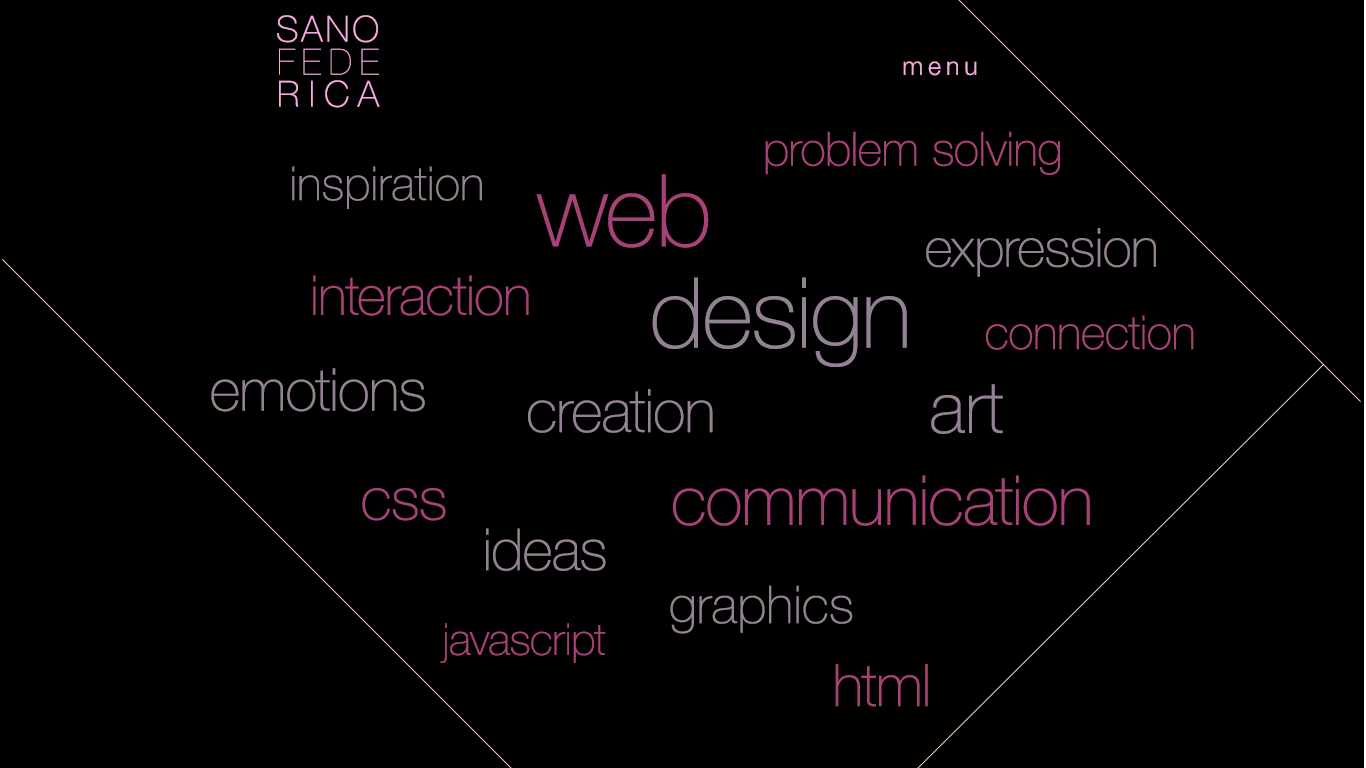
<style>
.page{position:relative;width:1366px;height:768px;background:#000000}
.page>*{position:absolute;margin:0}
.t1{font:36px/34px "HelveticaNeue-Thin";letter-spacing:0.075em;color:#f3a9dd}
.t2{font:36px/33px "HelveticaNeue-UltraLight";letter-spacing:0.22em;color:#f3a9dd}
.t3{font:36px/32px "HelveticaNeue-Thin";letter-spacing:0.26em;color:#f3a9dd}
.t4{font:25px "HelveticaNeue-Light";letter-spacing:0.2em;color:#f3a9dd}
.t5{font:47px "HelveticaNeueLTStd-Th";color:#a64277}
.t6{font:47px "HelveticaNeueLTStd-Th";color:#938294}
.t7{font:101px "HelveticaNeueLTStd-Th";color:#a64277}
.t8{font:54px "HelveticaNeueLTStd-Th";color:#938294}
.t9{font:55px "HelveticaNeueLTStd-Th";color:#a64277}
.t10{font:98px "HelveticaNeueLTStd-Th";color:#938294}
.t11{font:59px "HelveticaNeueLTStd-Th";color:#938294}
.t12{font:60px "HelveticaNeueLTStd-Th";color:#938294}
.t13{font:72px "HelveticaNeueLTStd-Th";color:#938294}
.t14{font:69px "HelveticaNeueLTStd-Th";color:#a64277}
.t15{font:60px "HelveticaNeueLTStd-Th";color:#a64277}
.t16{font:58px "HelveticaNeueLTStd-Th";color:#938294}
.t17{font:52px "HelveticaNeueLTStd-Th";color:#938294}
.t18{font:44px "HelveticaNeueLTStd-Th";color:#a64277}
.t19{font:59px "HelveticaNeueLTStd-Th";color:#a64277}
</style>
<div class="page">
<p class="t1" style="left:277px;top:15px;width:103px;height:93px;text-align:right">SANO<br><span class="t2">FEDE<br></span><span class="t3">RICA</span></p>
<p class="t4" style="left:903px;top:61px;width:74px;height:15px">menu</p>
<p class="t5" style="left:765px;top:131px;width:295px;height:44px">problem solving</p>
<p class="t6" style="left:292px;top:166px;width:190px;height:43px">inspiration</p>
<p class="t7" style="left:536px;top:174px;width:173px;height:74px">web</p>
<p class="t8" style="left:926px;top:228px;width:230px;height:49px">expression</p>
<p class="t9" style="left:313px;top:275px;width:216px;height:41px">interaction</p>
<p class="t10" style="left:652px;top:277px;width:255px;height:90px">design</p>
<p class="t5" style="left:986px;top:315px;width:208px;height:35px">connection</p>
<p class="t11" style="left:211px;top:368px;width:214px;height:44px">emotions</p>
<p class="t12" style="left:528px;top:389px;width:185px;height:44px">creation</p>
<p class="t13" style="left:931px;top:384px;width:72px;height:50px">art</p>
<p class="t14" style="left:673px;top:475px;width:417px;height:51px">communication</p>
<p class="t15" style="left:362px;top:488px;width:84px;height:33px">css</p>
<p class="t16" style="left:486px;top:528px;width:120px;height:43px">ideas</p>
<p class="t17" style="left:670px;top:585px;width:183px;height:49px">graphics</p>
<p class="t18" style="left:440px;top:623px;width:166px;height:40px">javascript</p>
<p class="t19" style="left:835px;top:664px;width:93px;height:43px">html</p>
</div>
